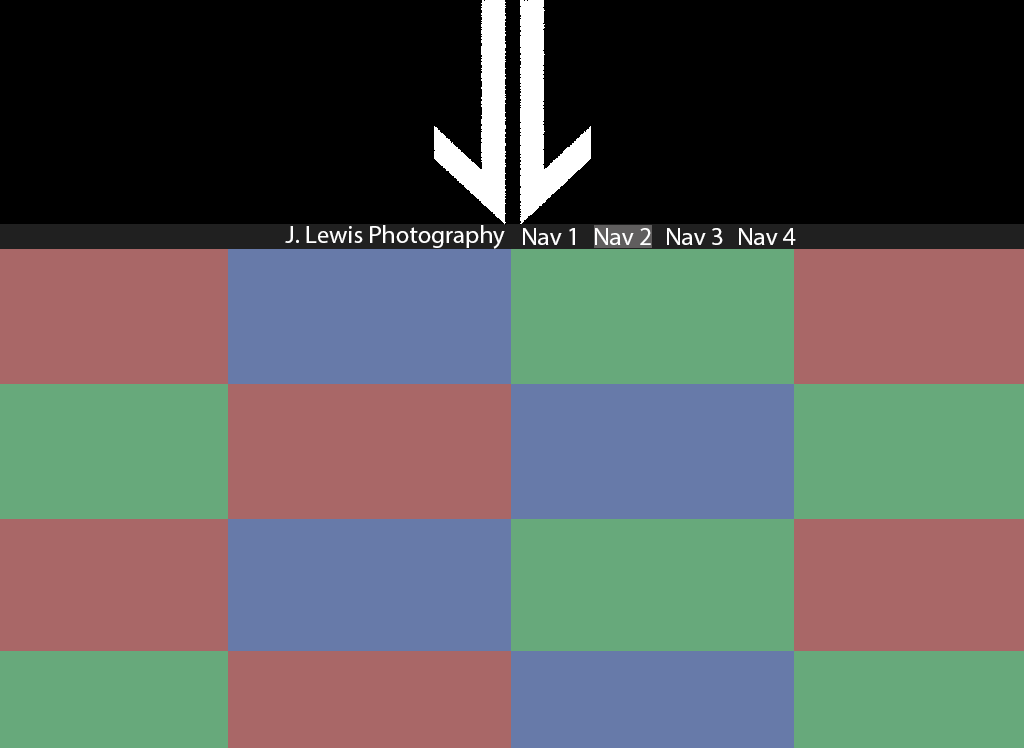
<style>
.page{position:relative;width:1024px;height:748px;background:#000000}
.page>*{position:absolute;margin:0}
.t1{font:25px "MyriadPro-Regular";color:#ffffff}
</style>
<div class="page">
<p class="t1" style="left:285px;top:225px;width:220px;height:24px">J. Lewis Photography</p>
<p class="t1" style="left:523px;top:228px;width:273px;height:17px">Nav 1 Nav 2 Nav 3 Nav 4</p>
</div>
